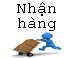
<style>
.page{position:relative;width:71px;height:58px;background:#ffffff}
.page>*{position:absolute;margin:0}
.t1{font:15.8px/14.8px "CourierNewPSMT";letter-spacing:-0.005em;color:#000000}
</style>
<div class="page">
<p class="t1" style="left:17px;top:2px;width:39px;height:29px;text-align:center">Nhận<br>hàng</p>
</div>
